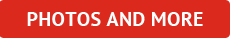
<style>
.page{position:relative;width:230px;height:38px;background:#dc291e}
.page>*{position:absolute;margin:0}
.t1{font:19px "PTSans-Bold";letter-spacing:0.01em;color:#ffffff;scale:1.06 1}
</style>
<div class="page">
<p class="t1" style="left:27px;top:12px;width:176px;height:14px">PHOTOS AND MORE</p>
</div>
